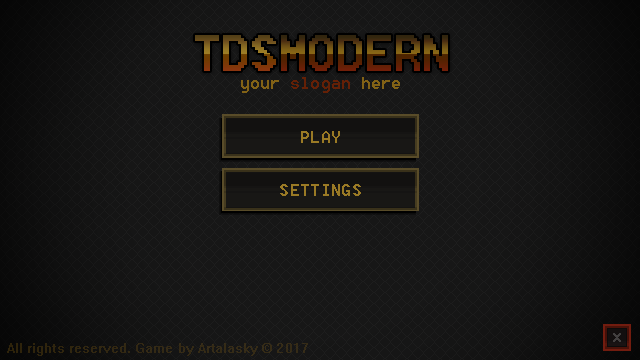
<style>
.page{position:relative;width:640px;height:360px}
.page>*{position:absolute;margin:0}
.t1{font:60px "Terminal";letter-spacing:0.01em}
.t2{font:12px "Terminal";letter-spacing:0.01em;color:#642006}
.t3{font:12px "Terminal";letter-spacing:0.01em;color:#826216}
.t4{font:30px "Terminal";letter-spacing:0.01em;color:#9a7a25}
.t5{font:6px/60px "System";letter-spacing:0.01em;color:#342914}
</style>
<div class="page">
<p class="t1" style="left:195px;top:35px;width:253px;height:36px">TDSMODERN</p>
<p class="t2" style="left:241px;top:77px;width:159px;height:16px"><span class="t3">your </span>slogan<span class="t3"> here</span></p>
<p class="t4" style="left:301px;top:131px;width:39px;height:12px">PLAY</p>
<p class="t4" style="left:280px;top:184px;width:81px;height:12px">SETTINGS</p>
<p class="t5" style="left:7px;top:343px;width:301px;height:13px">All rights reserved. Game by Artalasky © 2017</p>
</div>
